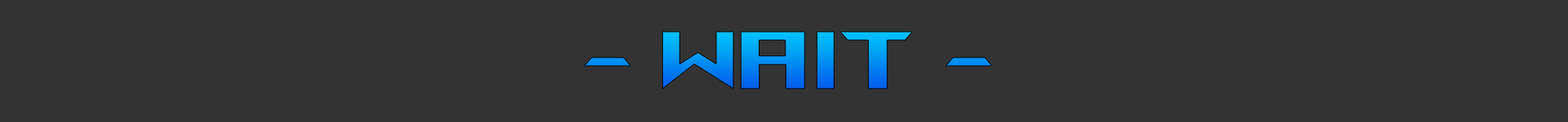
<style>
.page{position:relative;width:1568px;height:122px;background:#333333}
.page>*{position:absolute;margin:0}
.t1{font:81.7px "AniMeMatrix-MB_EN"}
</style>
<div class="page">
<p class="t1" style="left:584px;top:32px;width:408px;height:57px">- WAIT -</p>
</div>
